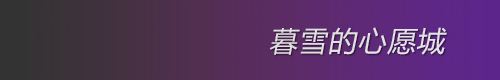
<style>
.page{position:relative;width:500px;height:80px}
.page>*{position:absolute;margin:0}
.t1{font:28px "MicrosoftYaHei";letter-spacing:0.05em;color:#e4dfe7;font-style:italic}
</style>
<div class="page">
<p class="t1" style="left:269px;top:27px;width:178px;height:28px">暮雪的心愿城</p>
</div>
